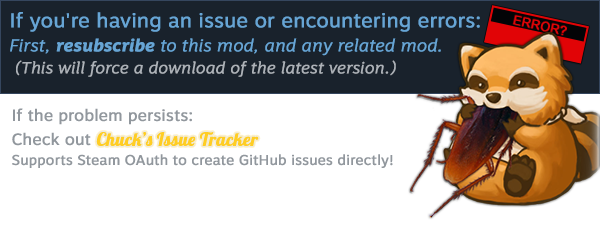
<style>
.page{position:relative;width:600px;height:225px;background:#ffffff}
.page>*{position:absolute;margin:0}
.t1{font:16px/22px "MotivaSans-LightItalic";color:#adb2b8;font-weight:bold}
.t2{font:20px "MotivaSans-Regular";color:#67a5d5;font-weight:bold}
.t3{font:17px/24px "MotivaSans-LightItalic";color:#67a5d5;font-weight:bold}
.t4{font:17px/24px "MotivaSans-BoldItalic";color:#67a5d5;font-weight:bold}
.t5{font:14px/20px "MotivaSans-Regular";color:#91979d;font-weight:bold}
.t6{font:16px/24px "MotivaSans-Regular";color:#91979d;font-weight:bold}
.t7{font:18px "Lobster-Regular";color:#ffcd23;font-weight:bold}
</style>
<div class="page">
<p class="t1" style="left:10px;top:12px;width:470px;height:65px"><span class="t2">If you're having an issue or encountering errors:<br></span><span class="t3">First, </span><span class="t4">resubscribe </span><span class="t3">to this mod, and any related mod.<br></span> (This will force a download of the latest version.)</p>
<p class="t5" style="left:12px;top:108px;width:381px;height:60px"><span class="t6">If the problem persists:<br>Check out                                  <br></span>Supports Steam OAuth to create GitHub issues directly!</p>
<p class="t7" style="left:96px;top:132px;width:163px;height:14px">Chuck’s Issue Tracker</p>
</div>
